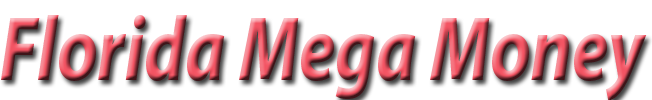
<style>
.page{position:relative;width:652px;height:100px;background:#ffffff}
.page>*{position:absolute;margin:0}
.t1{font:92px "MyriadPro-BoldIt";scale:0.79 1}
</style>
<div class="page">
<p class="t1" style="left:1px;top:15px;width:646px;height:86px">Florida Mega Money</p>
</div>
